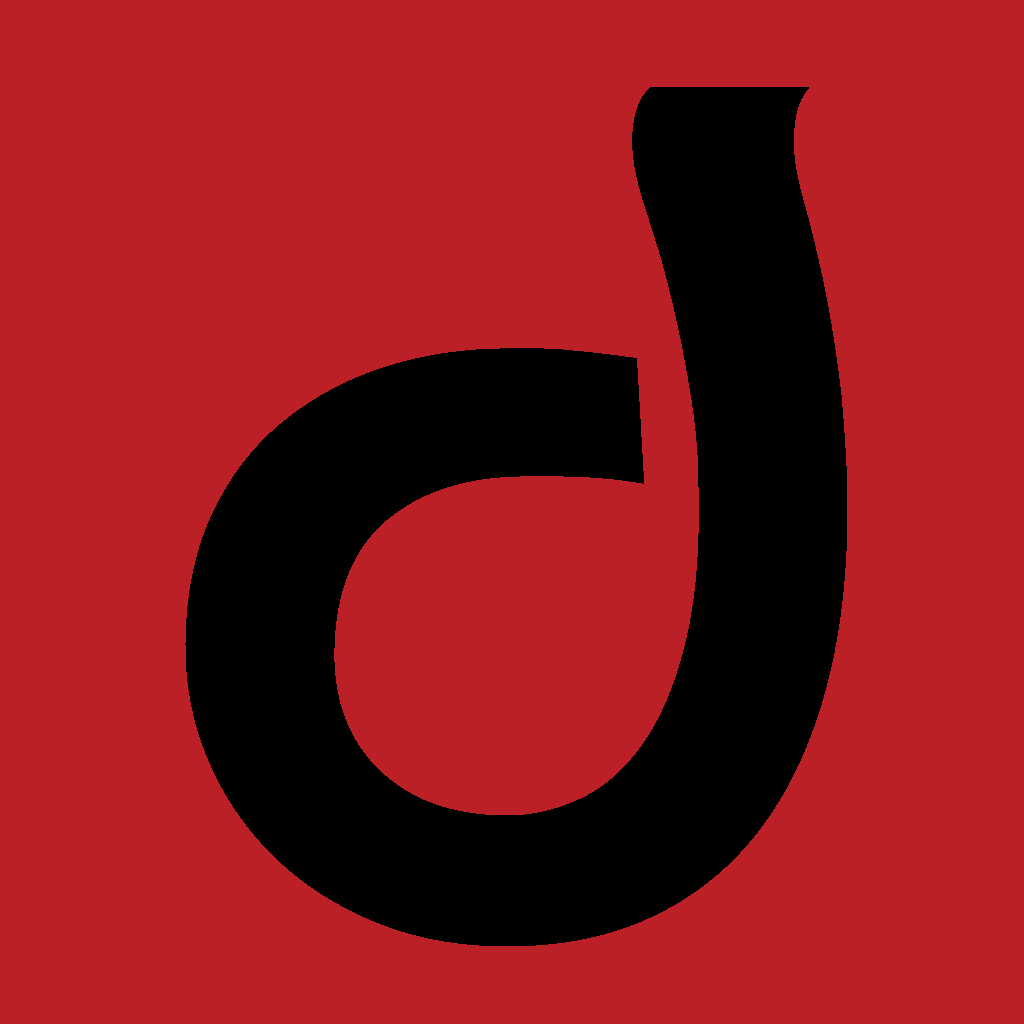
<style>
.page{position:relative;width:1024px;height:1024px;background:#ba2026}
.page>*{position:absolute;margin:0}
.t1{font:1204.7px "newdreamers";color:#000000}
</style>
<div class="page">
<p class="t1" style="left:185px;top:87px;width:662px;height:859px">d</p>
</div>
